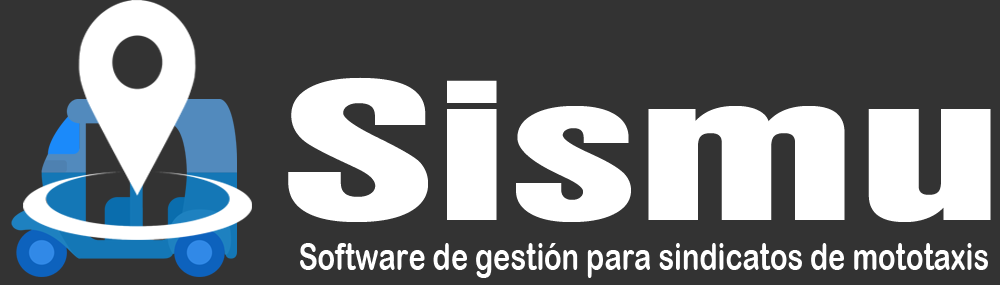
<style>
.page{position:relative;width:1000px;height:285px;background:#333333}
.page>*{position:absolute;margin:0}
.t1{font:173.1px "Swiss921BT-RegularA";color:#ffffff;scale:1.69 1}
.t2{font:38px "ArialRoundedMTBold";color:#ffffff;scale:0.76 1}
</style>
<div class="page">
<p class="t1" style="left:288px;top:77px;width:703px;height:145px">Sismu</p>
<p class="t2" style="left:300px;top:243px;width:688px;height:35px">Software de gestión para sindicatos de mototaxis</p>
</div>
